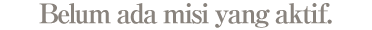
<style>
.page{position:relative;width:372px;height:30px;background:#ffffff}
.page>*{position:absolute;margin:0}
.t1{font:27px "RyuminPro-ExBold";letter-spacing:-0.08em;color:#89837d}
</style>
<div class="page">
<p class="t1" style="left:39px;top:3px;width:293px;height:25px">Belum ada misi yang aktif.</p>
</div>
